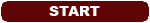
<style>
.page{position:relative;width:150px;height:23px;background:#5f0505}
.page>*{position:absolute;margin:0}
.t1{font:14px "Arial-Black";color:#ffffff}
</style>
<div class="page">
<p class="t1" style="left:49px;top:6px;width:51px;height:10px">START</p>
</div>
